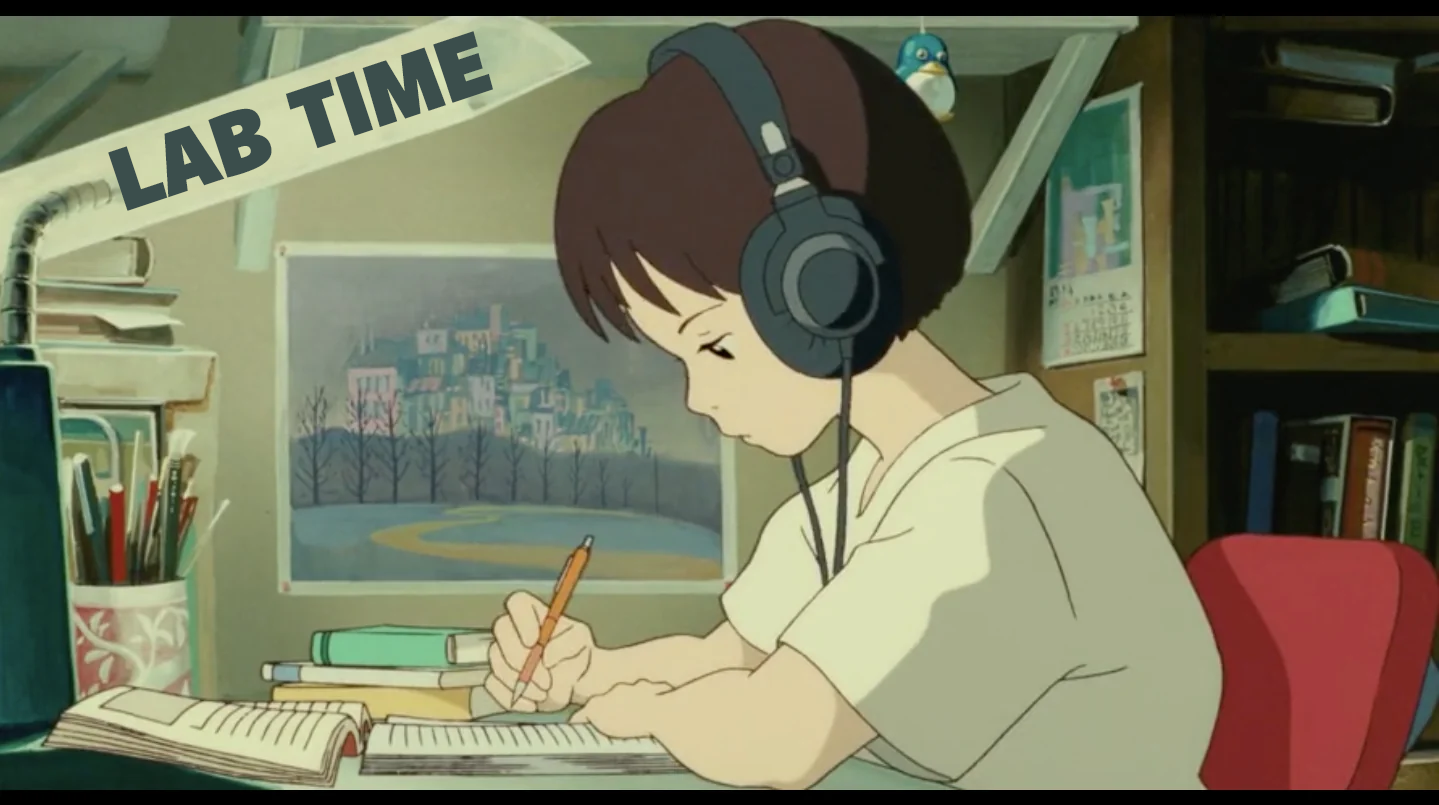
<style>
.page{position:relative;width:1439px;height:805px}
.page>*{position:absolute;margin:0}
.t1{font:90px "AkagiPro-Fat";color:#3b4e4c;text-transform:uppercase}
</style>
<div class="page">
<p class="t1" style="left:108px;top:31px;width:385px;height:180px;rotate:-18deg">Lab Time</p>
</div>
